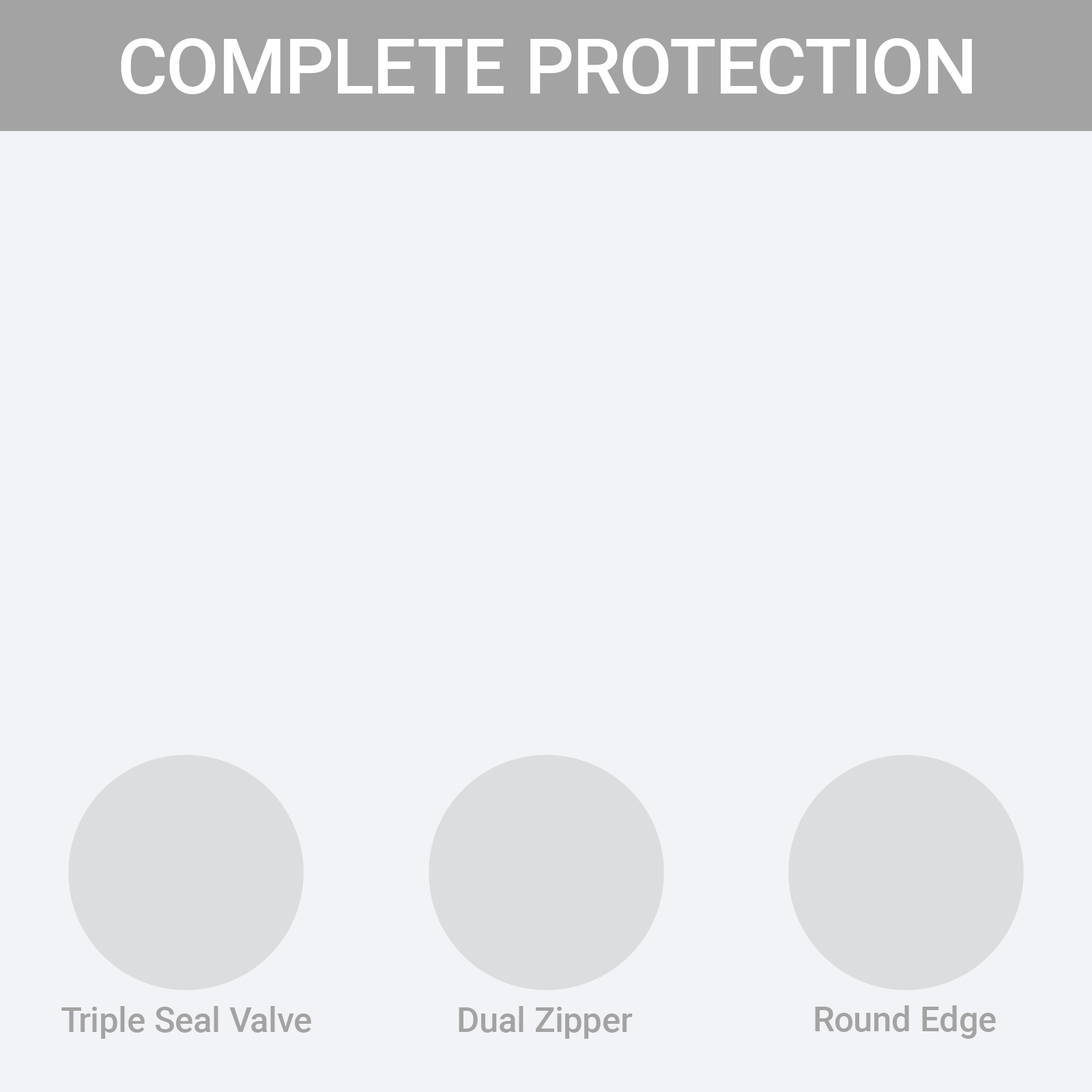
<style>
.page{position:relative;width:1092px;height:1092px;background:#f2f3f6}
.page>*{position:absolute;margin:0}
.t1{font:77.2px "Roboto-Medium";color:#ffffff}
.t2{font:34.9px "Roboto-Medium";color:#a3a3a3}
</style>
<div class="page">
<p class="t1" style="left:121px;top:38px;width:851px;height:56px">COMPLETE PROTECTION</p>
<p class="t2" style="left:61px;top:1006px;width:250px;height:33px">Triple Seal Valve</p>
<p class="t2" style="left:459px;top:1006px;width:174px;height:33px">Dual Zipper</p>
<p class="t2" style="left:815px;top:1005px;width:181px;height:34px">Round Edge</p>
</div>
